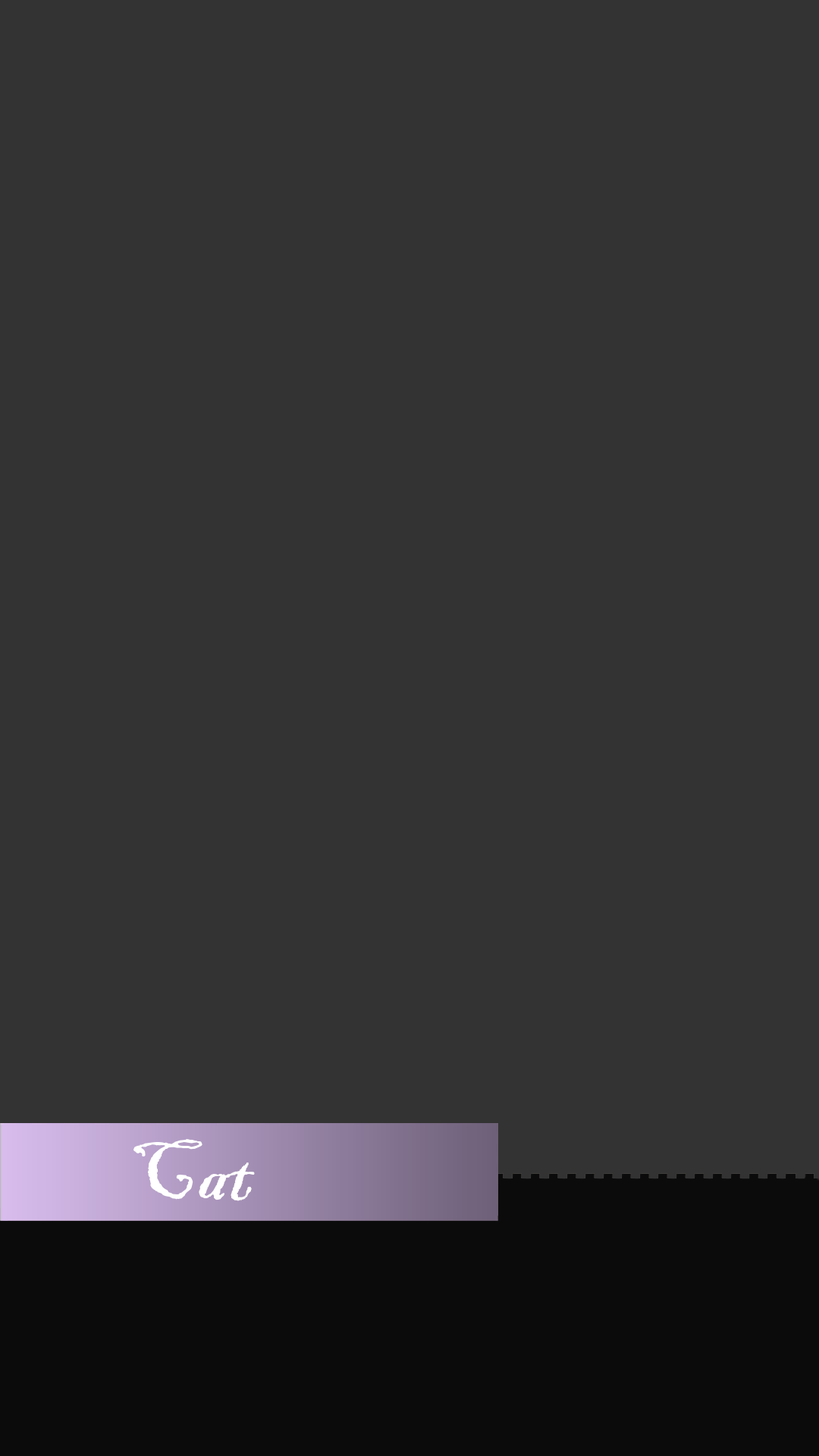
<style>
.page{position:relative;width:819px;height:1456px;background:#333333}
.page>*{position:absolute;margin:0}
.t1{font:151.7px "BlackadderITC-Regular";color:#ffffff}
</style>
<div class="page">
<p class="t1" style="left:133px;top:1139px;width:122px;height:62px">Cat</p>
</div>
